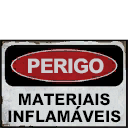
<style>
.page{position:relative;width:128px;height:128px;background:#ffffff}
.page>*{position:absolute;margin:0}
.t1{font:20px "MHeiPRC-Xbold";letter-spacing:-0.04em;color:#cecbce}
.t2{font:16px "MHeiPRC-Xbold";color:#000000}
.t3{font:16.4px "Swiss721BT-Black";color:#000000;font-weight:bold;scale:1.04 1}
</style>
<div class="page">
<p class="t1" style="left:28px;top:58px;width:76px;height:16px">PERIGO</p>
<p class="t2" style="left:19px;top:93px;width:91px;height:13px">MATERIAIS</p>
<p class="t2" style="left:8px;top:110px;width:113px;height:13px">INFLAMAVEIS</p>
<p class="t3" style="left:75px;top:106px;width:6px;height:4px">´</p>
</div>
